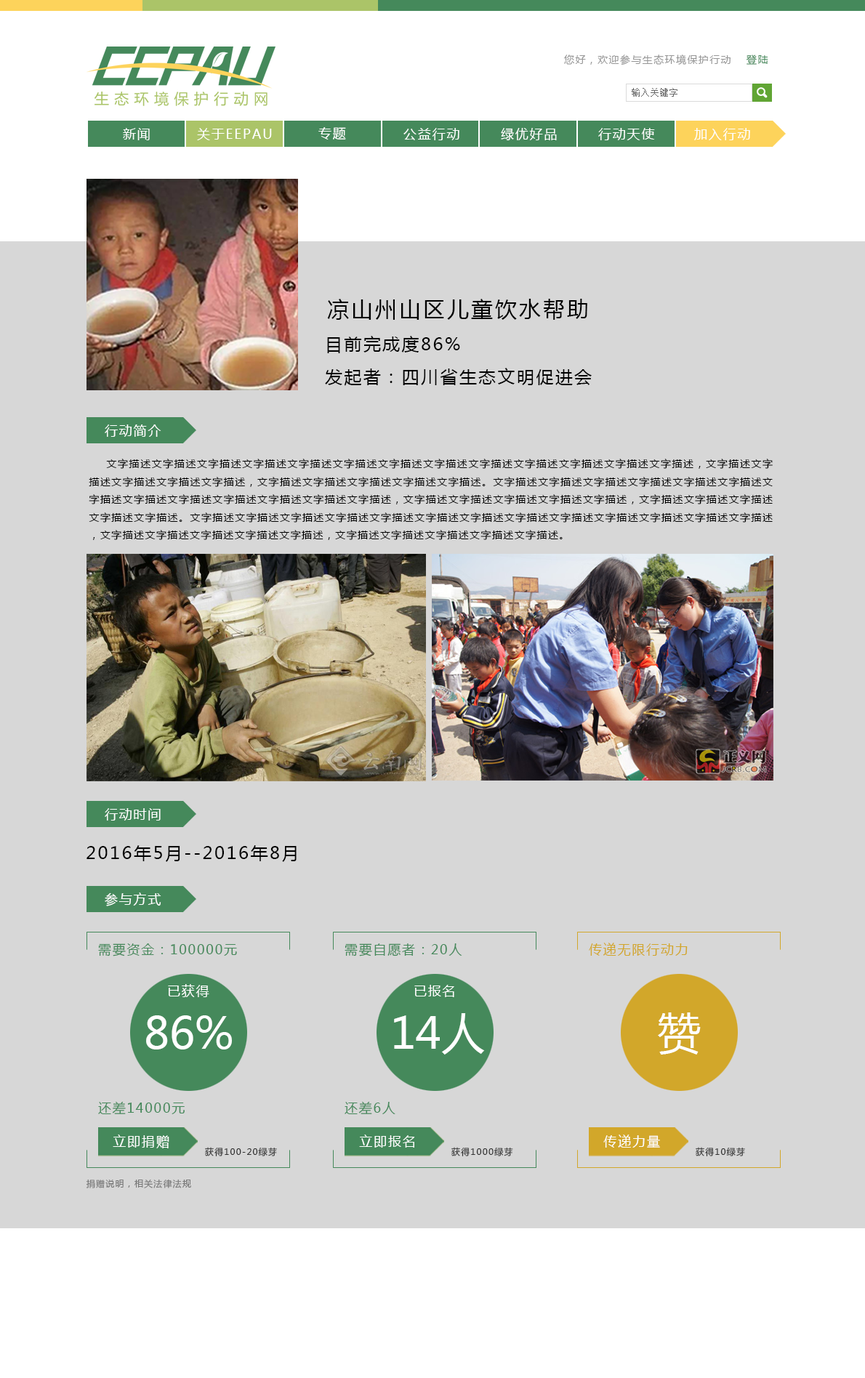
<style>
.page{position:relative;width:865px;height:1378px;background:#d7d7d7}
.page>*{position:absolute;margin:0}
.t1{font:10.2px "MicrosoftYaHei";letter-spacing:0.1em;color:#969696}
.t2{font:10.2px "MicrosoftYaHei";letter-spacing:0.1em;color:#45895b}
.t3{font:13.1px "MicrosoftYaHei";letter-spacing:0.1em;color:#ffffff}
.t4{font:21.8px "MicrosoftYaHei";letter-spacing:0.1em;color:#000000}
.t5{font:17.4px "MicrosoftYaHei";letter-spacing:0.1em;color:#000000}
.t6{font:10.2px "MicrosoftYaHei";letter-spacing:0.1em;color:#000000}
.t7{font:13.1px "MicrosoftYaHei";letter-spacing:0.1em;color:#45895b}
.t8{font:13.1px "MicrosoftYaHei";letter-spacing:0.1em;color:#d2a62a}
.t9{font:43.6px "MicrosoftYaHei";color:#ffffff}
.t10{font:13.2px "MicrosoftYaHei";letter-spacing:0.1em;color:#ffffff}
.t11{font:8.7px "MicrosoftYaHei";letter-spacing:0.1em;color:#323232}
.t12{font:8.7px "MicrosoftYaHei";letter-spacing:0.1em;color:#787878}
</style>
<div class="page">
<p class="t1" style="left:564px;top:55px;width:167px;height:10px">您好，欢迎参与生态环境保护行动</p>
<p class="t2" style="left:747px;top:55px;width:21px;height:10px">登陆</p>
<p class="t3" style="left:123px;top:128px;width:27px;height:12px">新闻</p>
<p class="t3" style="left:197px;top:128px;width:75px;height:12px">关于EEPAU</p>
<p class="t3" style="left:318px;top:127px;width:28px;height:13px">专题</p>
<p class="t3" style="left:403px;top:128px;width:56px;height:12px">公益行动</p>
<p class="t3" style="left:501px;top:128px;width:56px;height:13px">绿优好品</p>
<p class="t3" style="left:598px;top:128px;width:57px;height:12px">行动天使</p>
<p class="t3" style="left:694px;top:128px;width:56px;height:12px">加入行动</p>
<p class="t4" style="left:327px;top:299px;width:260px;height:21px">凉山州山区儿童饮水帮助</p>
<p class="t5" style="left:327px;top:336px;width:133px;height:17px">目前完成度86%</p>
<p class="t5" style="left:325px;top:368px;width:267px;height:18px">发起者：四川省生态文明促进会</p>
<p class="t3" style="left:105px;top:425px;width:56px;height:12px">行动简介</p>
<p class="t6" style="left:89px;top:459px;width:684px;height:81px;text-align:justify">文字描述文字描述文字描述文字描述文字描述文字描述文字描述文字描述文字描述文字描述文字描述文字描述文字描述，文字描述文字描述文字描述文字描述文字描述，文字描述文字描述文字描述文字描述文字描述。文字描述文字描述文字描述文字描述文字描述文字描述文字描述文字描述文字描述文字描述文字描述文字描述文字描述，文字描述文字描述文字描述文字描述文字描述，文字描述文字描述文字描述文字描述文字描述。文字描述文字描述文字描述文字描述文字描述文字描述文字描述文字描述文字描述文字描述文字描述文字描述文字描述，文字描述文字描述文字描述文字描述文字描述，文字描述文字描述文字描述文字描述文字描述。</p>
<p class="t3" style="left:105px;top:808px;width:56px;height:13px">行动时间</p>
<p class="t5" style="left:87px;top:845px;width:210px;height:17px">2016年5月--2016年8月</p>
<p class="t3" style="left:105px;top:893px;width:56px;height:14px">参与方式</p>
<p class="t7" style="left:98px;top:944px;width:139px;height:13px">需要资金：100000元</p>
<p class="t7" style="left:345px;top:944px;width:117px;height:13px">需要自愿者：20人</p>
<p class="t8" style="left:589px;top:943px;width:99px;height:13px">传递无限行动力</p>
<p class="t3" style="left:168px;top:984px;width:41px;height:13px">已获得</p>
<p class="t3" style="left:414px;top:985px;width:40px;height:12px">已报名</p>
<p class="t9" style="left:394px;top:1013px;width:91px;height:42px">14人</p>
<p class="t9" style="left:658px;top:1013px;width:43px;height:42px">赞</p>
<p class="t9" style="left:146px;top:1016px;width:86px;height:34px">86%</p>
<p class="t7" style="left:98px;top:1101px;width:87px;height:13px">还差14000元</p>
<p class="t7" style="left:345px;top:1101px;width:50px;height:13px">还差6人</p>
<p class="t10" style="left:113px;top:1135px;width:56px;height:14px">立即捐赠</p>
<p class="t10" style="left:359px;top:1135px;width:56px;height:13px">立即报名</p>
<p class="t10" style="left:603px;top:1135px;width:57px;height:13px">传递力量</p>
<p class="t11" style="left:205px;top:1147px;width:72px;height:10px">获得100-20绿芽</p>
<p class="t11" style="left:451px;top:1147px;width:62px;height:10px">获得1000绿芽</p>
<p class="t11" style="left:696px;top:1147px;width:49px;height:10px">获得10绿芽</p>
<p class="t12" style="left:86px;top:1179px;width:105px;height:10px">捐赠说明，相关法律法规</p>
</div>
